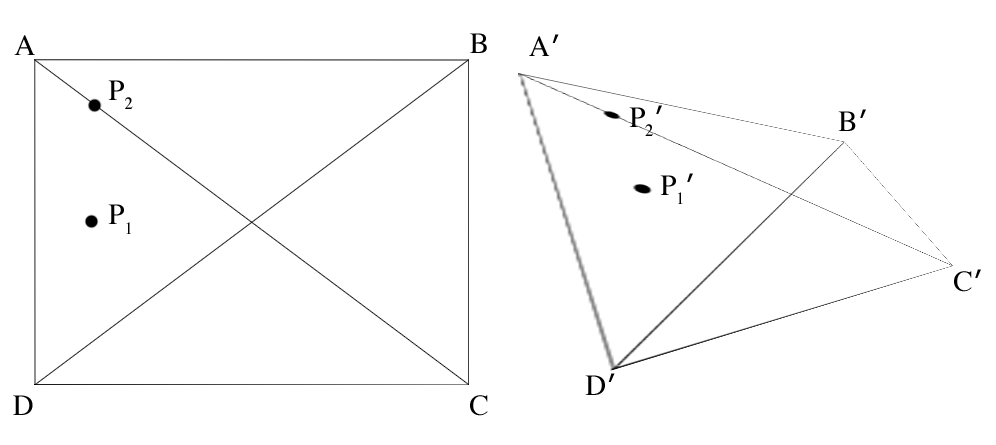
<style>
.page{position:relative;width:996px;height:445px;background:#ffffff}
.page>*{position:absolute;margin:0}
.t1{font:29.2px "Times-Roman";color:#000000}
.t2{font:29.2px "Helvetica";color:#000000}
</style>
<div class="page">
<p class="t1" style="left:14px;top:35px;width:21px;height:20px">A</p>
<p class="t1" style="left:470px;top:33px;width:17px;height:20px">B</p>
<p class="t1" style="left:529px;top:34px;width:30px;height:22px">A<span class="t2">′</span></p>
<p class="t1" style="left:108px;top:80px;width:25px;height:29px">P2</p>
<p class="t1" style="left:629px;top:105px;width:33px;height:31px">P2<span class="t2">′</span></p>
<p class="t1" style="left:838px;top:109px;width:28px;height:22px">B<span class="t2">′</span></p>
<p class="t1" style="left:660px;top:173px;width:33px;height:31px">P1<span class="t2">′</span></p>
<p class="t1" style="left:108px;top:204px;width:23px;height:30px">P1</p>
<p class="t1" style="left:954px;top:269px;width:27px;height:23px">C<span class="t2">′</span></p>
<p class="t1" style="left:585px;top:373px;width:30px;height:22px">D<span class="t2">′</span></p>
<p class="t1" style="left:13px;top:395px;width:20px;height:20px">D</p>
<p class="t1" style="left:470px;top:395px;width:18px;height:21px">C</p>
</div>
